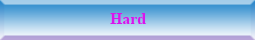
<style>
.page{position:relative;width:255px;height:40px}
.page>*{position:absolute;margin:0}
.t1{font:15.8px "TimesNewRomanPS-BoldMT";color:#d815ed}
</style>
<div class="page">
<p class="t1" style="left:110px;top:13px;width:36px;height:11px">Hard</p>
</div>
